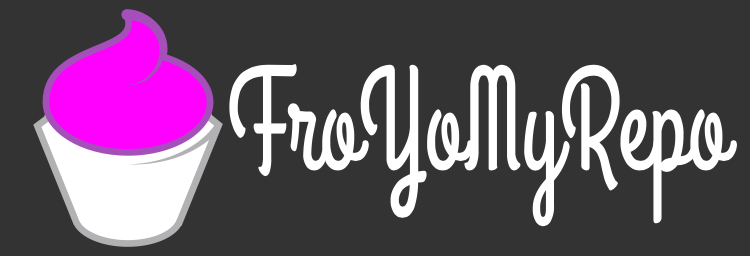
<style>
.page{position:relative;width:750px;height:256px;background:#333333}
.page>*{position:absolute;margin:0}
.t1{font:145.2px "GrandHotel-Regular";color:#ffffff;scale:0.73 1}
</style>
<div class="page">
<p class="t1" style="left:229px;top:63px;width:510px;height:164px">FroYoMyRepo</p>
</div>
